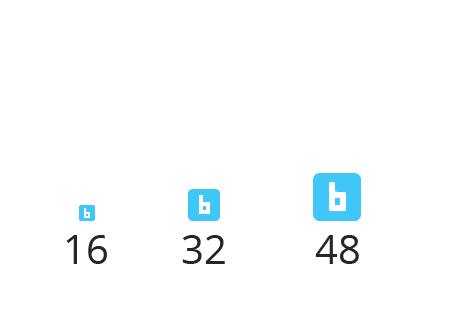
<style>
.page{position:relative;width:454px;height:322px;background:#ffffff}
.page>*{position:absolute;margin:0}
.t1{font:40px "OpenSans";color:#262626}
</style>
<div class="page">
<p class="t1" style="left:66px;top:235px;width:41px;height:29px">16</p>
<p class="t1" style="left:182px;top:235px;width:43px;height:29px">32</p>
<p class="t1" style="left:315px;top:235px;width:44px;height:29px">48</p>
</div>
